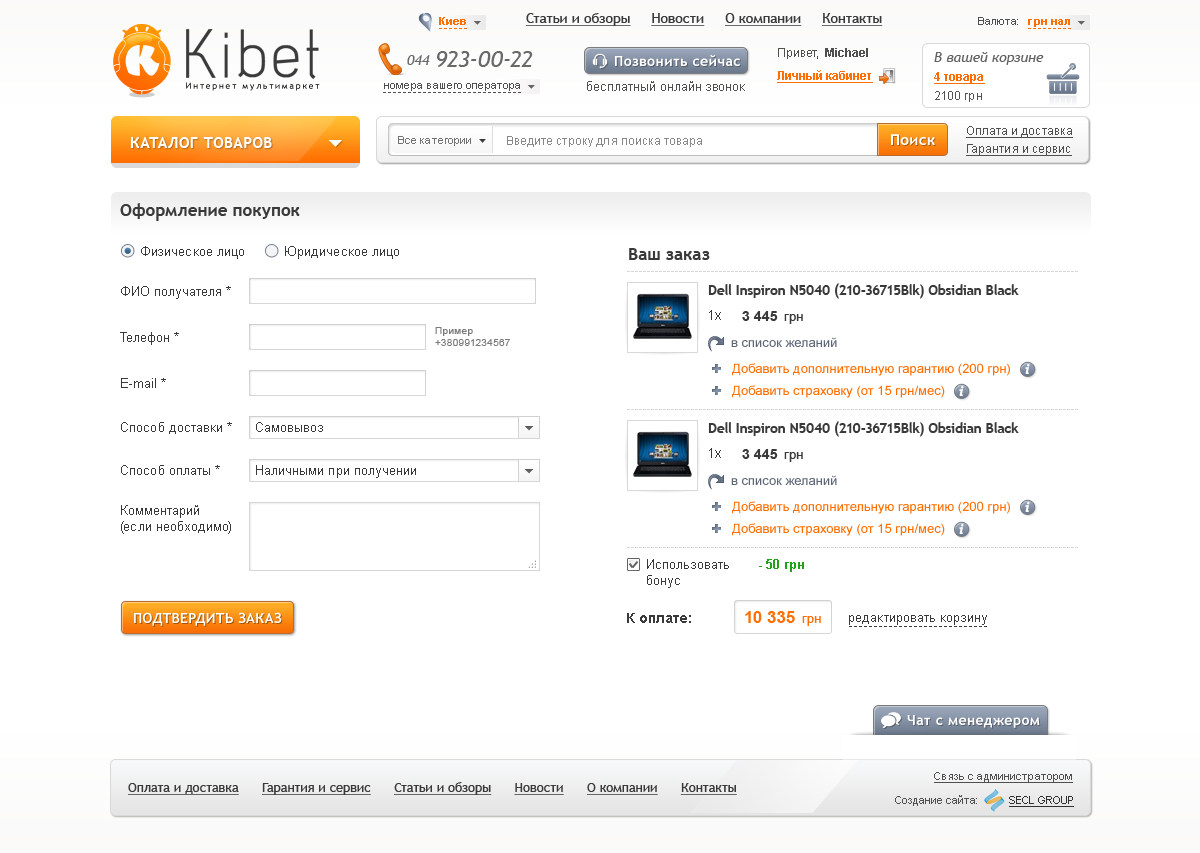
<style>
.page{position:relative;width:1200px;height:853px;background:#ffffff}
.page>*{position:absolute;margin:0}
.t1{font:11px "Arial-BoldMT";color:#ff6e01}
.t2{font:14px "TrebuchetMS";color:#393939;text-decoration:underline}
.t3{font:11px "ArialMT";color:#4f4f4f}
.t4{font:87.4px "Acid";color:#3b3b3b}
.t5{font:23px "TrebuchetMS-Italic";color:#696969}
.t6{font:14px "TrebuchetMS-Bold";letter-spacing:0.03em;color:#ffffff}
.t7{font:12px "ArialMT";color:#4f4f4f}
.t8{font:12px "Arial-BoldMT";color:#4f4f4f}
.t9{font:14px "TrebuchetMS-Italic";color:#616161}
.t10{font:14px "TrebuchetMS-Italic";color:#696969}
.t11{font:12px "Arial-BoldMT";color:#ff6e01;text-decoration:underline}
.t12{font:8.8px "TrebuchetMS";letter-spacing:0.2em;color:#060606}
.t13{font:13px "ArialMT";color:#4f4f4f}
.t14{font:12px "ArialMT";color:#535353}
.t15{font:12px "ArialMT";color:#4f4f4f;text-decoration:underline}
.t16{font:15px "TrebuchetMS-Bold";letter-spacing:0.03em;color:#ffffff}
.t17{font:11px "ArialMT";color:#727272}
.t18{font:12px "ArialMT";color:#888888}
.t19{font:17px "TrebuchetMS-Bold";color:#393939}
.t20{font:13px "ArialMT";color:#393939}
.t21{font:13.5px "TrebuchetMS-Bold";color:#393939}
.t22{font:14px "ArialMT";letter-spacing:0.02em;color:#393939}
.t23{font:14px "Arial-BoldMT";color:#393939}
.t24{font:10px "ArialMT";letter-spacing:0.02em;color:#797979}
.t25{font:13px "ArialMT";color:#5d6676}
.t26{font:13px "ArialMT";color:#ff6e01}
.t27{font:15px "ChaparralPro-BoldIt";color:#ffffff}
.t28{font:13px/16px "ArialMT";color:#393939}
.t29{font:13px "Arial-BoldMT";color:#1ea218}
.t30{font:14px "TrebuchetMS-Bold";letter-spacing:0.02em;color:#ffffff}
.t31{font:17px "Arial-BoldMT";color:#ff6e01}
.t32{font:11px "ArialMT";color:#4f4f4f;text-decoration:underline}
.t33{font:13px "TrebuchetMS";color:#393939;text-decoration:underline}
.t34{font:11px "ArialMT";color:#303030;text-decoration:underline}
</style>
<div class="page">
<p class="t1" style="left:439px;top:17px;width:27px;height:8px">Киев</p>
<p class="t2" style="left:526px;top:13px;width:357px;height:13px">Статьи и обзоры     Новости     О компании     Контакты</p>
<p class="t3" style="left:978px;top:17px;width:40px;height:8px">Валюта:</p>
<p class="t4" style="left:186px;top:29px;width:133px;height:50px">Kibet</p>
<p class="t1" style="left:1028px;top:19px;width:42px;height:8px">грн нал</p>
<p class="t5" style="left:437px;top:51px;width:96px;height:16px">923-00-22</p>
<p class="t6" style="left:615px;top:54px;width:125px;height:12px">Позвонить сейчас</p>
<p class="t7" style="left:778px;top:48px;width:90px;height:11px">Привет,  <span class="t8">Michael</span></p>
<p class="t9" style="left:934px;top:52px;width:110px;height:13px">В вашей корзине</p>
<p class="t10" style="left:407px;top:55px;width:23px;height:10px">044</p>
<p class="t11" style="left:777px;top:70px;width:96px;height:13px">Личный кабинет</p>
<p class="t11" style="left:934px;top:72px;width:51px;height:12px">4 товара</p>
<p class="t12" style="left:186px;top:82px;width:134px;height:9px">Интернет мультимаркет</p>
<p class="t3" style="left:384px;top:83px;width:136px;height:8px">номера вашего оператора</p>
<p class="t13" style="left:587px;top:81px;width:158px;height:10px">бесплатный онлайн звонок</p>
<p class="t14" style="left:935px;top:91px;width:47px;height:11px">2100 грн</p>
<p class="t15" style="left:966px;top:126px;width:107px;height:12px">Оплата и доставка</p>
<p class="t16" style="left:130px;top:137px;width:142px;height:11px">КАТАЛОГ ТОВАРОВ</p>
<p class="t17" style="left:398px;top:136px;width:73px;height:10px">Все категории</p>
<p class="t18" style="left:507px;top:136px;width:195px;height:11px">Введите строку для поиска товара</p>
<p class="t16" style="left:891px;top:134px;width:44px;height:11px">Поиск</p>
<p class="t15" style="left:966px;top:144px;width:106px;height:12px">Гарантия и сервис</p>
<p class="t19" style="left:120px;top:203px;width:180px;height:18px">Оформление покупок</p>
<p class="t20" style="left:141px;top:246px;width:103px;height:13px">Физическое лицо</p>
<p class="t20" style="left:285px;top:246px;width:114px;height:13px">Юридическое лицо</p>
<p class="t19" style="left:629px;top:248px;width:81px;height:12px">Ваш заказ</p>
<p class="t20" style="left:121px;top:286px;width:110px;height:13px">ФИО получателя *</p>
<p class="t21" style="left:708px;top:283px;width:311px;height:16px">Dell Inspiron N5040 (210-36715Blk) Obsidian Black</p>
<p class="t22" style="left:709px;top:310px;width:12px;height:10px">1x</p>
<p class="t23" style="left:742px;top:311px;width:61px;height:13px">3 445  <span class="t20">грн</span></p>
<p class="t24" style="left:435px;top:327px;width:75px;height:19px">Пример<br>+380991234567</p>
<p class="t20" style="left:120px;top:332px;width:59px;height:13px">Телефон *</p>
<p class="t25" style="left:731px;top:337px;width:106px;height:10px">в список желаний</p>
<p class="t26" style="left:732px;top:363px;width:278px;height:13px">Добавить дополнительную гарантию (200 грн)</p>
<p class="t27" style="left:1025px;top:364px;width:5px;height:10px">i</p>
<p class="t20" style="left:121px;top:378px;width:45px;height:10px">E-mail *</p>
<p class="t26" style="left:732px;top:385px;width:213px;height:13px">Добавить страховку (от 15 грн/мес)</p>
<p class="t27" style="left:959px;top:386px;width:5px;height:10px">i</p>
<p class="t20" style="left:121px;top:422px;width:111px;height:12px">Способ доставки *</p>
<p class="t20" style="left:256px;top:422px;width:67px;height:10px">Самовывоз</p>
<p class="t21" style="left:708px;top:421px;width:311px;height:16px">Dell Inspiron N5040 (210-36715Blk) Obsidian Black</p>
<p class="t22" style="left:709px;top:448px;width:12px;height:10px">1x</p>
<p class="t23" style="left:742px;top:449px;width:61px;height:13px">3 445  <span class="t20">грн</span></p>
<p class="t20" style="left:121px;top:465px;width:99px;height:10px">Способ оплаты *</p>
<p class="t20" style="left:256px;top:465px;width:160px;height:13px">Наличными при получении</p>
<p class="t25" style="left:731px;top:475px;width:106px;height:10px">в список желаний</p>
<p class="t28" style="left:121px;top:505px;width:110px;height:29px">Комментарий<br>(если необходимо)</p>
<p class="t26" style="left:732px;top:501px;width:278px;height:13px">Добавить дополнительную гарантию (200 грн)</p>
<p class="t27" style="left:1025px;top:502px;width:5px;height:10px">i</p>
<p class="t26" style="left:732px;top:523px;width:213px;height:13px">Добавить страховку (от 15 грн/мес)</p>
<p class="t27" style="left:959px;top:524px;width:5px;height:10px">i</p>
<p class="t20" style="left:647px;top:559px;width:82px;height:29px">Использовать<br>бонус</p>
<p class="t29" style="left:759px;top:559px;width:45px;height:13px">- 50 грн</p>
<p class="t30" style="left:134px;top:612px;width:148px;height:14px">ПОДТВЕРДИТЬ ЗАКАЗ</p>
<p class="t23" style="left:627px;top:613px;width:64px;height:10px">К оплате:</p>
<p class="t31" style="left:745px;top:611px;width:76px;height:15px">10 335  <span class="t26">грн</span></p>
<p class="t20" style="left:849px;top:615px;width:138px;height:10px">редактировать корзину</p>
<p class="t6" style="left:907px;top:715px;width:133px;height:13px">Чат с менеджером</p>
<p class="t32" style="left:934px;top:772px;width:139px;height:11px">Связь с администратором</p>
<p class="t33" style="left:128px;top:782px;width:609px;height:13px">Оплата и доставка      Гарантия и сервис      Статьи и обзоры      Новости      О компании      Контакты</p>
<p class="t3" style="left:895px;top:795px;width:82px;height:11px">Создание сайта:</p>
<p class="t34" style="left:1009px;top:796px;width:65px;height:11px">SECL GROUP</p>
</div>
